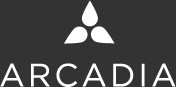
<style>
.page{position:relative;width:176px;height:87px;background:#333333}
.page>*{position:absolute;margin:0}
.t1{font:32.2px "Gotham-Book";letter-spacing:0.1em;color:#ffffff;text-transform:uppercase}
</style>
<div class="page">
<p class="t1" style="left:0px;top:63px;width:176px;height:24px">Arcadia</p>
</div>
